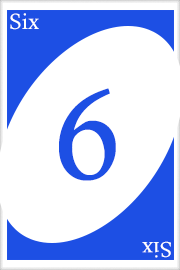
<style>
.page{position:relative;width:180px;height:270px;background:#ffffff}
.page>*{position:absolute;margin:0}
.t1{font:22px "CalistoMT";color:#ffffff}
.t2{font:128px "CalistoMT";color:#1d4fe4}
.t3{font:21.7px "CalistoMT";color:#ffffff}
</style>
<div class="page">
<p class="t1" style="left:10px;top:13px;width:29px;height:17px">Six</p>
<p class="t2" style="left:59px;top:88px;width:57px;height:93px">6</p>
<p class="t3" style="left:142px;top:241px;width:29px;height:17px;rotate:180deg">Six</p>
</div>
